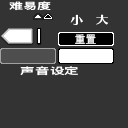
<style>
.page{position:relative;width:128px;height:128px;background:#333333}
.page>*{position:absolute;margin:0}
.t1{font:9px "DFKingGothicSC14-Semibold";letter-spacing:0.005em;color:#ffffff;scale:1.56 1}
.t2{font:10.7px "nintendo_HeiTiW5_002";letter-spacing:0.005em;color:#ffffff}
.t3{font:9.2px "DFKingGothicSC14-Semibold";letter-spacing:0.005em;color:#ffffff;scale:1.58 1}
</style>
<div class="page">
<p class="t1" style="left:9px;top:1px;width:42px;height:10px">难易度</p>
<p class="t2" style="left:75px;top:34px;width:21px;height:10px">重置</p>
<p class="t3" style="left:20px;top:66px;width:58px;height:10px">声音设定</p>
</div>
